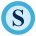
<style>
.page{position:relative;width:36px;height:36px;background:#ffffff}
.page>*{position:absolute;margin:0}
.t1{font:24.3px "TimesNewRomanPS-BoldMT";color:#0a2855}
</style>
<div class="page">
<p class="t1" style="left:12px;top:9px;width:12px;height:18px">S</p>
</div>
